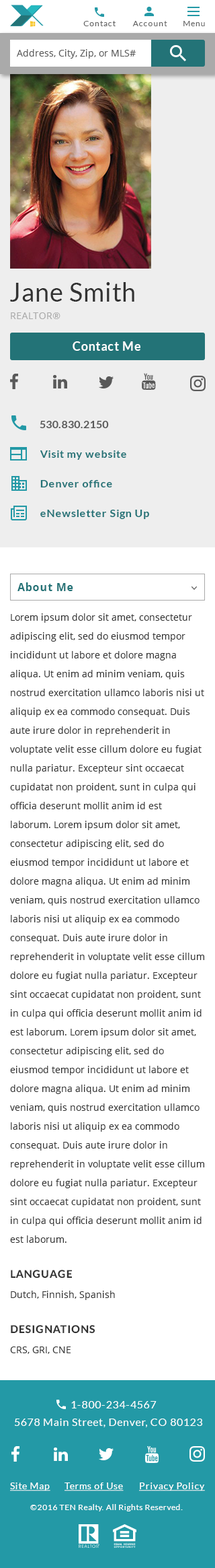
<style>
.page{position:relative;width:215px;height:1568px;background:#ffffff}
.page>*{position:absolute;margin:0}
.t1{font:8.1px "Lato-Regular";letter-spacing:0.075em;color:#666666}
.t2{font:9.4px "OpenSans";color:#595959}
.t3{font:25.6px "Lato-Regular";letter-spacing:0.025em;color:#323232}
.t4{font:9.4px "OpenSans";letter-spacing:0.025em;color:#aaaaaa}
.t5{font:12.1px "Lato-Bold";letter-spacing:0.05em;color:#ffffff}
.t6{font:10.8px "Lato-Bold";letter-spacing:0.025em;color:#595959}
.t7{font:10.8px "Lato-Bold";letter-spacing:0.05em;color:#237377}
.t8{font:10.8px "OpenSans-Bold";letter-spacing:0.05em;color:#237377}
.t9{font:9.4px/18.9px "OpenSans";color:#323232}
.t10{font:10.8px "Lato-Heavy";letter-spacing:0.05em;color:#323232;text-transform:uppercase}
.t11{font:9.4px "OpenSans";color:#323232}
.t12{font:10.8px "Lato-Regular";letter-spacing:0.05em;color:#ffffff}
.t13{font:10.8px "Lato-Regular";letter-spacing:0.05em;color:#fffefe}
.t14{font:9.4px "Lato-Regular";letter-spacing:0.05em;color:#ffffff;text-decoration:underline}
.t15{font:8.1px "Lato-Regular";letter-spacing:0.05em;color:#ffffff}
</style>
<div class="page">
<p class="t1" style="left:83px;top:21px;width:33px;height:5px">Contact</p>
<p class="t1" style="left:133px;top:21px;width:35px;height:5px">Account</p>
<p class="t1" style="left:184px;top:21px;width:21px;height:5px">Menu</p>
<p class="t2" style="left:17px;top:49px;width:119px;height:10px">Address, City, Zip, or MLS#</p>
<p class="t3" style="left:10px;top:282px;width:125px;height:20px">Jane Smith</p>
<p class="t4" style="left:11px;top:312px;width:50px;height:7px">REALTOR®</p>
<p class="t5" style="left:73px;top:341px;width:68px;height:10px">Contact Me</p>
<p class="t6" style="left:40px;top:421px;width:69px;height:7px">530.830.2150</p>
<p class="t7" style="left:40px;top:450px;width:87px;height:10px">Visit my website</p>
<p class="t7" style="left:40px;top:480px;width:72px;height:7px">Denver office</p>
<p class="t7" style="left:40px;top:510px;width:109px;height:9px">eNewsletter Sign Up</p>
<p class="t8" style="left:18px;top:582px;width:55px;height:9px">About Me</p>
<p class="t9" style="left:10px;top:613px;width:195px;height:630px">Lorem ipsum dolor sit amet, consectetur adipiscing elit, sed do eiusmod tempor incididunt ut labore et dolore magna aliqua. Ut enim ad minim veniam, quis nostrud exercitation ullamco laboris nisi ut aliquip ex ea commodo consequat. Duis aute irure dolor in reprehenderit in voluptate velit esse cillum dolore eu fugiat nulla pariatur. Excepteur sint occaecat cupidatat non proident, sunt in culpa qui officia deserunt mollit anim id est laborum. Lorem ipsum dolor sit amet, consectetur adipiscing elit, sed do eiusmod tempor incididunt ut labore et dolore magna aliqua. Ut enim ad minim veniam, quis nostrud exercitation ullamco laboris nisi ut aliquip ex ea commodo consequat. Duis aute irure dolor in reprehenderit in voluptate velit esse cillum dolore eu fugiat nulla pariatur. Excepteur sint occaecat cupidatat non proident, sunt in culpa qui officia deserunt mollit anim id est laborum. Lorem ipsum dolor sit amet, consectetur adipiscing elit, sed do eiusmod tempor incididunt ut labore et dolore magna aliqua. Ut enim ad minim veniam, quis nostrud exercitation ullamco laboris nisi ut aliquip ex ea commodo consequat. Duis aute irure dolor in reprehenderit in voluptate velit esse cillum dolore eu fugiat nulla pariatur. Excepteur sint occaecat cupidatat non proident, sunt in culpa qui officia deserunt mollit anim id est laborum.</p>
<p class="t10" style="left:11px;top:1270px;width:61px;height:9px">Language</p>
<p class="t11" style="left:11px;top:1291px;width:104px;height:9px">Dutch, Finnish, Spanish</p>
<p class="t10" style="left:11px;top:1325px;width:84px;height:9px">Designations</p>
<p class="t11" style="left:10px;top:1347px;width:61px;height:7px">CRS, GRI, CNE</p>
<p class="t12" style="left:71px;top:1401px;width:86px;height:7px">1-800-234-4567</p>
<p class="t13" style="left:15px;top:1419px;width:188px;height:8px">5678 Main Street, Denver, CO 80123</p>
<p class="t14" style="left:10px;top:1482px;width:40px;height:9px">Site Map</p>
<p class="t14" style="left:65px;top:1482px;width:59px;height:9px">Terms of Use</p>
<p class="t14" style="left:139px;top:1482px;width:66px;height:9px">Privacy Policy</p>
<p class="t15" style="left:30px;top:1504px;width:153px;height:7px">©2016 TEN Realty. All Rights Reserved.</p>
</div>
